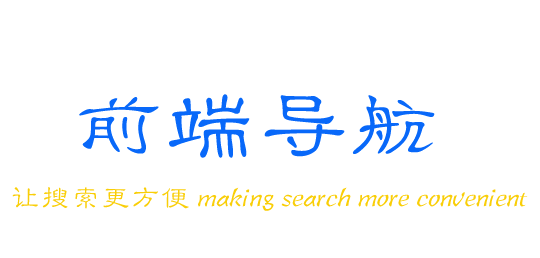
<style>
.page{position:relative;width:540px;height:258px;background:#ffffff}
.page>*{position:absolute;margin:0}
.t1{font:72px "STLibianTC-Regular";color:#0868f9}
.t2{font:30px "STLibianTC-Regular";color:#f9ce08}
</style>
<div class="page">
<p class="t1" style="left:79px;top:94px;width:356px;height:64px">前端导航</p>
<p class="t2" style="left:12px;top:187px;width:516px;height:24px">让搜索更方便 making search more convenient</p>
</div>
